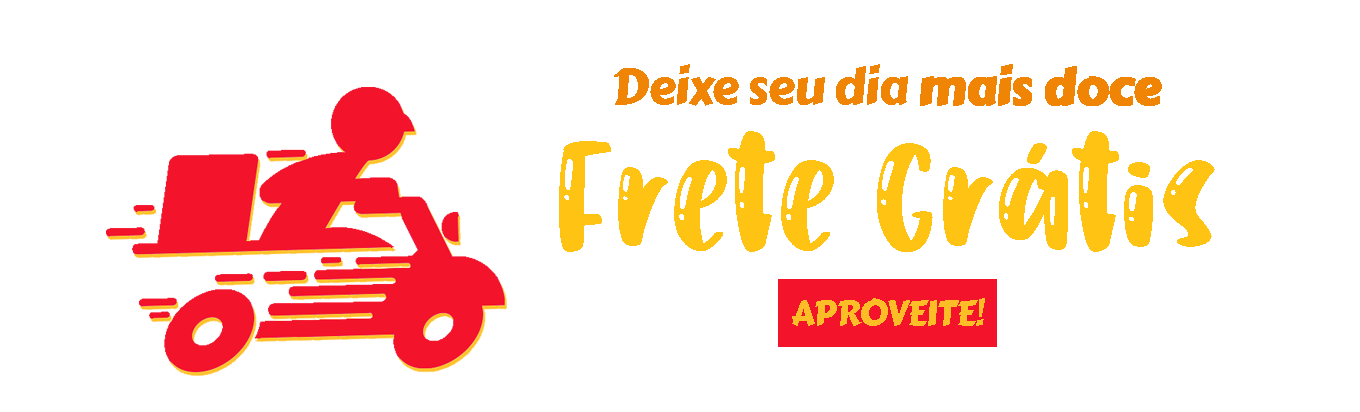
<style>
.page{position:relative;width:1360px;height:412px;background:#ffffff}
.page>*{position:absolute;margin:0}
.t1{font:50px "CarterOne";letter-spacing:-0.025em;color:#f08405}
.t2{font:50px "CarterOne";letter-spacing:-0.025em;color:#f08405;font-weight:bold}
.t3{font:110px "Humbleboysdemo";color:#ffc314}
</style>
<div class="page">
<p class="t1" style="left:614px;top:64px;width:548px;height:42px">Deixe seu dia <span class="t2">mais doce</span></p>
<p class="t3" style="left:559px;top:131px;width:656px;height:121px">Frete Grátis</p>
</div>
